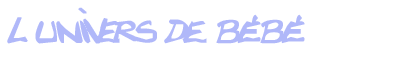
<style>
.page{position:relative;width:410px;height:60px;background:#ffffff}
.page>*{position:absolute;margin:0}
.t1{font:60px "Texted'critureLanfeust";color:#b0b8f9}
</style>
<div class="page">
<p class="t1" style="left:7px;top:7px;width:298px;height:37px">l‘univers de bébé</p>
</div>
